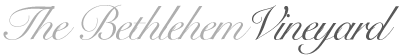
<style>
.page{position:relative;width:400px;height:56px;background:#ffffff}
.page>*{position:absolute;margin:0}
.t1{font:48px "SnellRoundhand";letter-spacing:-0.05em;color:#aeaeae}
.t2{font:48px "SnellRoundhand";letter-spacing:-0.05em;color:#585858}
</style>
<div class="page">
<p class="t1" style="left:3px;top:4px;width:248px;height:36px">The Bethlehem</p>
<p class="t2" style="left:252px;top:5px;width:147px;height:50px">Vineyard</p>
</div>
